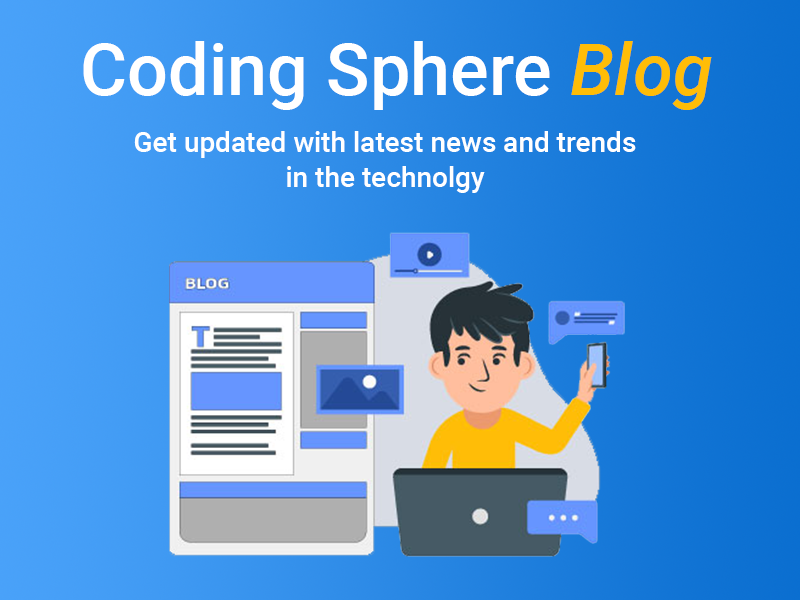
<style>
.page{position:relative;width:800px;height:600px}
.page>*{position:absolute;margin:0}
.t1{font:72px "Roboto-Medium";color:#ffffff}
.t2{font:72px "Roboto-MediumItalic";color:#ffbd07}
.t3{font:28px/5.8px "Roboto-Medium";color:#ffffff}
</style>
<div class="page">
<p class="t1" style="left:83px;top:41px;width:629px;height:69px">Coding Sphere <span class="t2">Blog</span></p>
<p class="t3" style="left:134px;top:131px;width:502px;height:62px;text-align:center">Get updated with latest news and trends <br><br><br><br><br><br>in the technolgy</p>
</div>
